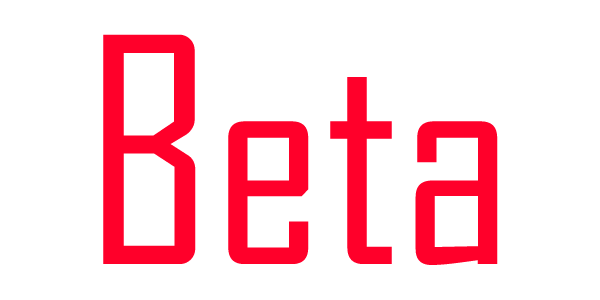
<style>
.page{position:relative;width:600px;height:300px;background:#ffffff}
.page>*{position:absolute;margin:0}
.t1{font:300px "AgencyFB-Reg";color:#ff002a}
</style>
<div class="page">
<p class="t1" style="left:103px;top:34px;width:395px;height:231px">Beta</p>
</div>
